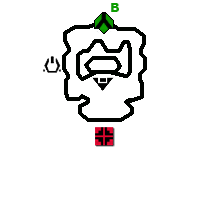
<style>
.page{position:relative;width:209px;height:200px;background:#ffffff}
.page>*{position:absolute;margin:0}
.t1{font:12px "Arial-Black";color:#0d9e01}
</style>
<div class="page">
<p class="t1" style="left:111px;top:3px;width:8px;height:9px">B</p>
</div>
